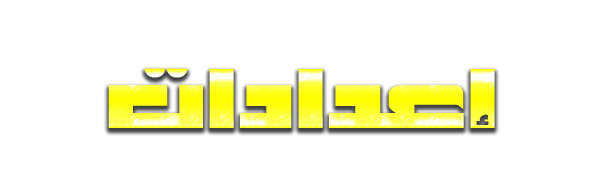
<style>
.page{position:relative;width:599px;height:193px;background:#ffffff}
.page>*{position:absolute;margin:0}
.t1{font:81.4px "Motken-noqta";scale:1.22 1}
</style>
<div class="page">
<p class="t1" style="left:108px;top:68px;width:387px;height:60px">إعدادات</p>
</div>
